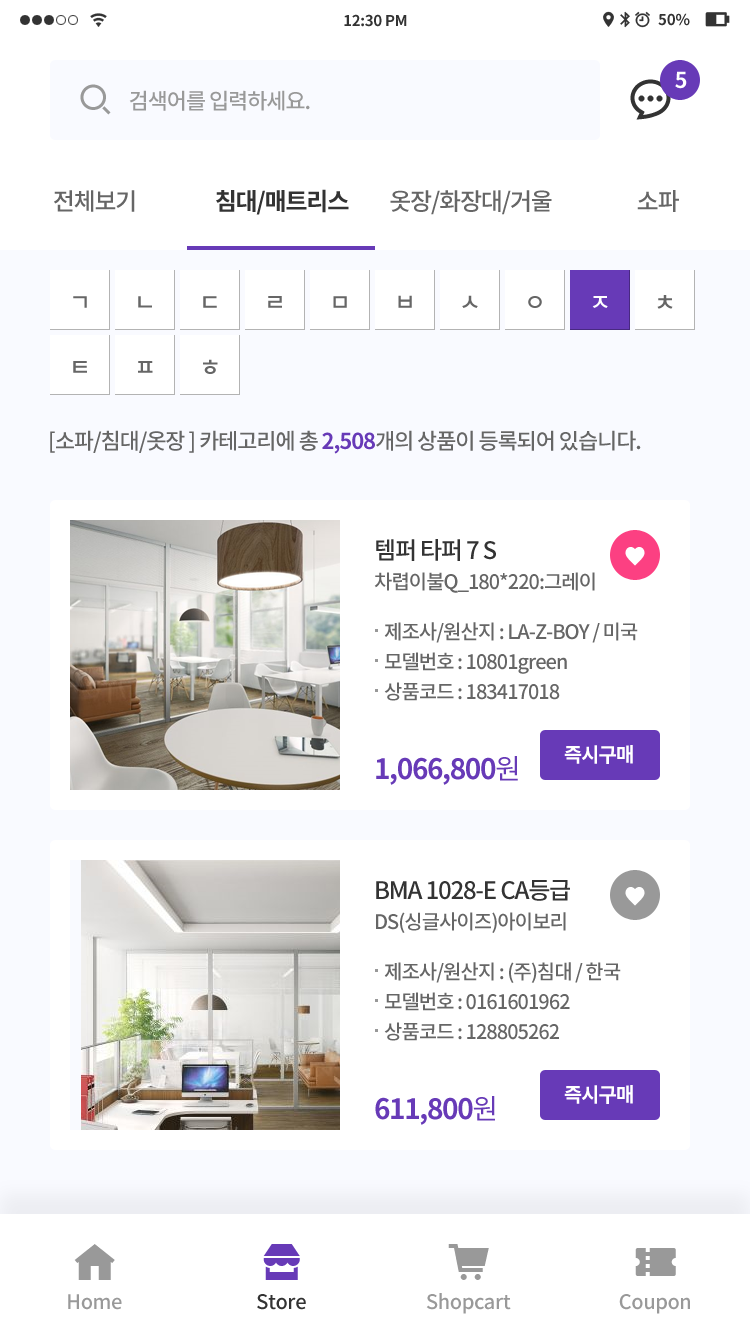
<style>
.page{position:relative;width:750px;height:1334px;background:#ffffff}
.page>*{position:absolute;margin:0}
.t1{font:15px "NotoSansCJKkr-Bold";letter-spacing:-0.02em;color:#333333}
.t2{font:15px "NotoSansCJKkr-Bold";color:#333333}
.t3{font:22px "NotoSansCJKkr-Bold";letter-spacing:-0.05em;color:#ffffff}
.t4{font:22px "NotoSansCJKkr-Medium";letter-spacing:-0.05em;color:#999999}
.t5{font:24px "NotoSansCJKkr-Medium";letter-spacing:-0.05em;color:#666666}
.t6{font:24px "NotoSansCJKkr-Bold";letter-spacing:-0.05em;color:#333333}
.t7{font:24px "NotoSansCJKkr-Medium";letter-spacing:-0.05em;color:#ffffff}
.t8{font:22px "NotoSansCJKkr-Medium";letter-spacing:-0.05em;color:#666666}
.t9{font:22px "NotoSansCJKkr-Bold";letter-spacing:-0.05em;color:#673ab7}
.t10{font:24px "NotoSansCJKkr-Medium";letter-spacing:-0.05em;color:#333333}
.t11{font:20px "NotoSansCJKkr-Medium";letter-spacing:-0.05em;color:#666666}
.t12{font:20px/30px "NotoSansCJKkr-Medium";letter-spacing:-0.05em;color:#666666}
.t13{font:20px "NotoSansCJKkr-Bold";letter-spacing:-0.05em;color:#ffffff}
.t14{font:28px "NotoSansCJKkr-Bold";letter-spacing:-0.05em;color:#673ab7}
.t15{font:28px "NotoSansCJKkr-Regular";letter-spacing:-0.05em;color:#673ab7}
.t16{font:20px "NotoSansCJKkr-Medium";letter-spacing:-0.02em;color:#999999}
.t17{font:20px "NotoSansCJKkr-Medium";letter-spacing:-0.02em;color:#333333}
</style>
<div class="page">
<p class="t1" style="left:344px;top:14px;width:63px;height:13px">12:30 PM</p>
<p class="t2" style="left:658px;top:13px;width:32px;height:13px">50%</p>
<p class="t3" style="left:675px;top:71px;width:12px;height:18px">5</p>
<p class="t4" style="left:129px;top:90px;width:181px;height:21px">검색어를 입력하세요.</p>
<p class="t5" style="left:54px;top:190px;width:81px;height:22px">전체보기</p>
<p class="t6" style="left:216px;top:189px;width:133px;height:26px">침대/매트리스</p>
<p class="t5" style="left:390px;top:190px;width:162px;height:25px">옷장/화장대/거울</p>
<p class="t5" style="left:637px;top:190px;width:42px;height:22px">소파</p>
<p class="t5" style="left:73px;top:296px;width:14px;height:12px">ㄱ</p>
<p class="t5" style="left:138px;top:296px;width:14px;height:12px">ㄴ</p>
<p class="t5" style="left:203px;top:296px;width:14px;height:12px">ㄷ</p>
<p class="t5" style="left:268px;top:296px;width:14px;height:12px">ㄹ</p>
<p class="t5" style="left:333px;top:296px;width:14px;height:12px">ㅁ</p>
<p class="t5" style="left:398px;top:295px;width:14px;height:13px">ㅂ</p>
<p class="t5" style="left:462px;top:295px;width:16px;height:13px">ㅅ</p>
<p class="t5" style="left:528px;top:296px;width:14px;height:12px">ㅇ</p>
<p class="t7" style="left:592px;top:296px;width:16px;height:12px">ㅈ</p>
<p class="t5" style="left:657px;top:295px;width:16px;height:14px">ㅊ</p>
<p class="t5" style="left:73px;top:361px;width:14px;height:12px">ㅌ</p>
<p class="t5" style="left:138px;top:361px;width:15px;height:12px">ㅍ</p>
<p class="t5" style="left:203px;top:359px;width:15px;height:15px">ㅎ</p>
<p class="t8" style="left:50px;top:430px;width:591px;height:24px">[소파/침대/옷장 ] 카테고리에 총 <span class="t9">2,508</span>개의 상품이 등록되어 있습니다.</p>
<p class="t10" style="left:376px;top:539px;width:120px;height:22px">템퍼 타퍼 7 S</p>
<p class="t11" style="left:374px;top:572px;width:221px;height:21px">차렵이불Q_180*220:그레이</p>
<p class="t12" style="left:384px;top:622px;width:254px;height:79px">제조사/원산지 : LA-Z-BOY / 미국 <br>모델번호 : 10801green <br>상품코드 : 183417018</p>
<p class="t13" style="left:564px;top:745px;width:69px;height:19px">즉시구매</p>
<p class="t14" style="left:376px;top:756px;width:142px;height:29px">1,066,800<span class="t15">원</span></p>
<p class="t10" style="left:376px;top:880px;width:194px;height:21px">BMA 1028-E CA등급</p>
<p class="t11" style="left:376px;top:912px;width:190px;height:21px">DS(싱글사이즈)아이보리</p>
<p class="t12" style="left:384px;top:962px;width:237px;height:79px">제조사/원산지 : (주)침대 / 한국<br>모델번호 : 0161601962<br>상품코드 : 128805262</p>
<p class="t13" style="left:564px;top:1085px;width:69px;height:19px">즉시구매</p>
<p class="t14" style="left:375px;top:1096px;width:120px;height:29px">611,800<span class="t15">원</span></p>
<p class="t16" style="left:68px;top:1294px;width:54px;height:16px">Home</p>
<p class="t17" style="left:257px;top:1294px;width:49px;height:16px">Store</p>
<p class="t16" style="left:426px;top:1293px;width:85px;height:21px">Shopcart</p>
<p class="t16" style="left:619px;top:1294px;width:71px;height:20px">Coupon</p>
</div>
